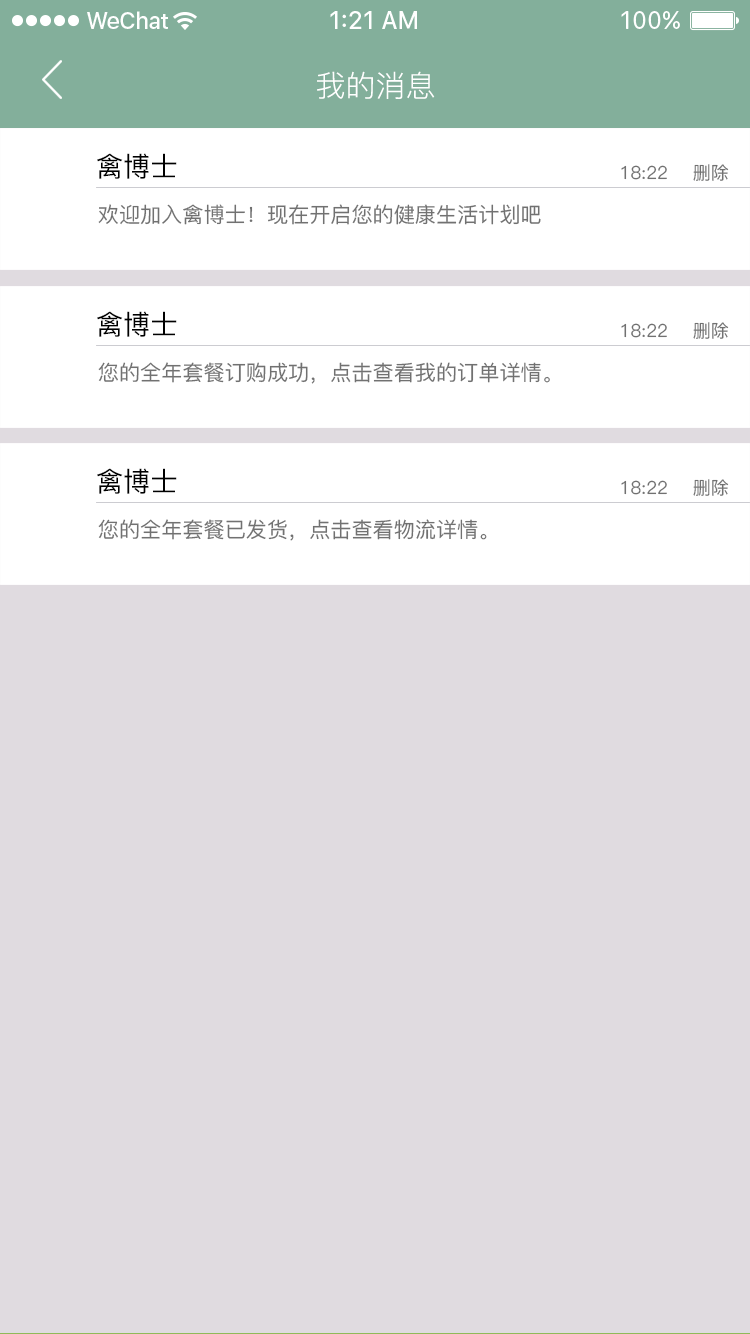
<style>
.page{position:relative;width:750px;height:1334px;background:#e0dbe0}
.page>*{position:absolute;margin:0}
.t1{font:30px "PingFang-SC-Regular";color:#ffffff;text-transform:uppercase}
.t2{font:27.2px "PingFang-SC-Medium";color:#000000}
.t3{font:18.1px "PingFang-SC-Medium";color:#717171}
.t4{font:21.1px "PingFang-SC-Medium";color:#717171}
</style>
<div class="page">
<p class="t1" style="left:317px;top:71px;width:118px;height:28px">我的消息</p>
<p class="t2" style="left:97px;top:153px;width:80px;height:26px">禽博士</p>
<p class="t3" style="left:621px;top:165px;width:46px;height:15px">18:22</p>
<p class="t3" style="left:693px;top:164px;width:36px;height:17px">删除</p>
<p class="t4" style="left:98px;top:204px;width:443px;height:21px">欢迎加入禽博士！现在开启您的健康生活计划吧</p>
<p class="t2" style="left:97px;top:311px;width:80px;height:26px">禽博士</p>
<p class="t3" style="left:621px;top:323px;width:46px;height:15px">18:22</p>
<p class="t3" style="left:693px;top:322px;width:36px;height:17px">删除</p>
<p class="t4" style="left:98px;top:362px;width:452px;height:22px">您的全年套餐订购成功，点击查看我的订单详情。</p>
<p class="t2" style="left:97px;top:468px;width:80px;height:26px">禽博士</p>
<p class="t3" style="left:621px;top:480px;width:46px;height:15px">18:22</p>
<p class="t3" style="left:693px;top:479px;width:36px;height:17px">删除</p>
<p class="t4" style="left:98px;top:519px;width:389px;height:22px">您的全年套餐已发货，点击查看物流详情。</p>
</div>
